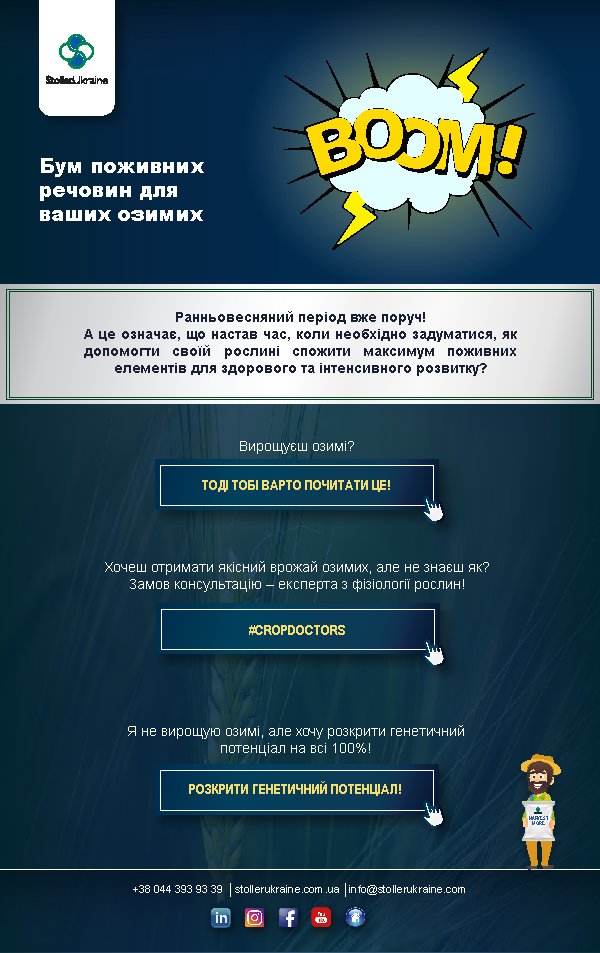
<style>
.page{position:relative;width:600px;height:953px}
.page>*{position:absolute;margin:0}
.t1{font:14px "Arial-BoldMT";color:#192034}
.t2{font:14px/15px "ArialNarrow-Bold";color:#f4dd6e;text-transform:uppercase}
.t3{font:14px "ArialMT";color:#ffffff}
.t4{font:14px/24px "ArialNarrow-Bold";color:#f4dd6e;text-transform:uppercase}
</style>
<div class="page">
<p class="t1" style="left:84px;top:311px;width:433px;height:65px;text-align:justify">Ранньовесняний період вже поруч! <br>А це означає, що настав час, коли необхідно задуматися, як допомогти своїй рослині спожити максимум поживних елементів для здорового та інтенсивного розвитку?</p>
<p class="t2" style="left:202px;top:441px;width:188px;height:51px;text-align:center"><span class="t3">Вирощуєш озимі? <br><br><br></span>Тоді тобі варто почитати це!</p>
<p class="t3" style="left:105px;top:561px;width:384px;height:74px;text-align:center">Хочеш отримати якісний врожай озимих, але не знаєш як?<br>Замов консультацію – експерта з фізіології рослин!<br><br><span class="t4">#CropDoctors</span></p>
<p class="t3" style="left:128px;top:725px;width:336px;height:71px;text-align:center">Я не вирощую озимі, але хочу розкрити генетичний потенціал на всі 100%!<br><br><span class="t4">Розкрити генетичний потенціал!</span></p>
</div>
